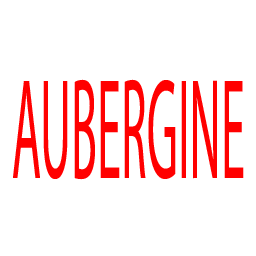
<style>
.page{position:relative;width:256px;height:256px;background:#ffffff}
.page>*{position:absolute;margin:0}
.t1{font:144px "MyriadPro-Regular";color:#ff0000;scale:0.33 1}
</style>
<div class="page">
<p class="t1" style="left:13px;top:79px;width:231px;height:101px">AUBERGINE</p>
</div>
